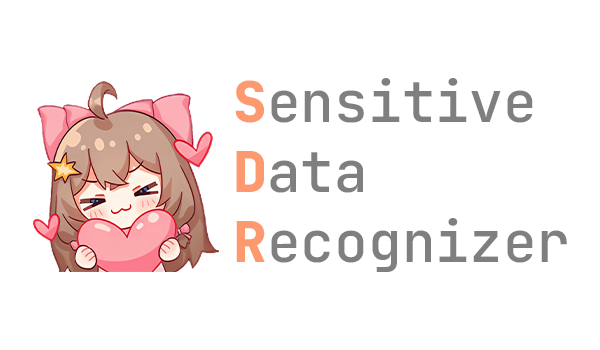
<style>
.page{position:relative;width:600px;height:350px;background:#ffffff}
.page>*{position:absolute;margin:0}
.t1{font:56.2px "JetBrainsMonoRoman-SemiBold";color:#7f7f7f}
.t2{font:56.2px "JetBrainsMonoRoman-ExtraBold";color:#fc996e}
</style>
<div class="page">
<p class="t1" style="left:235px;top:78px;width:298px;height:45px"><span class="t2">S</span>ensitive</p>
<p class="t1" style="left:236px;top:151px;width:127px;height:42px"><span class="t2">D</span>ata</p>
<p class="t1" style="left:236px;top:218px;width:331px;height:54px"><span class="t2">R</span>ecognizer</p>
</div>
